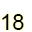
<style>
.page{position:relative;width:32px;height:32px;background:#ffffff}
.page>*{position:absolute;margin:0}
.t1{font:22.2px "ArialMT";color:#010001}
</style>
<div class="page">
<p class="t1" style="left:2px;top:14px;width:22px;height:16px">18</p>
</div>
